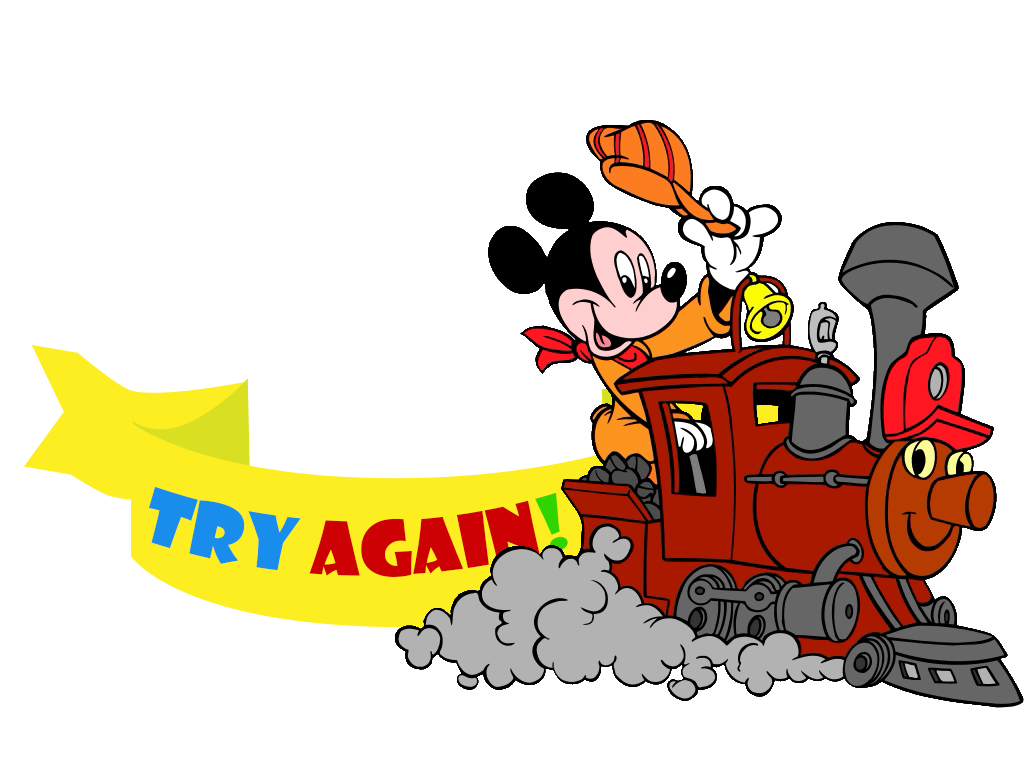
<style>
.page{position:relative;width:1024px;height:768px;background:#ffffff}
.page>*{position:absolute;margin:0}
.t1{font:72px "ShowcardGothic-Reg";color:#cd0003}
.t2{font:72px "ShowcardGothic-Reg";color:#188dec}
.t3{font:72px "ShowcardGothic-Reg";color:#30d400}
</style>
<div class="page">
<p class="t1" style="left:148px;top:486px;width:420px;height:91px"><span class="t2">Try</span> Again<span class="t3">!</span></p>
</div>
